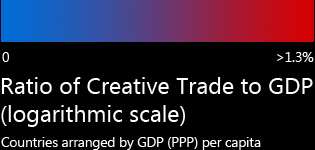
<style>
.page{position:relative;width:315px;height:150px;background:#000000}
.page>*{position:absolute;margin:0}
.t1{font:13.5px "MicrosoftNewTaiLue";color:#ffffff}
.t2{font:23.2px "MicrosoftNewTaiLue";color:#ffffff}
</style>
<div class="page">
<p class="t1" style="left:2px;top:52px;width:312px;height:10px">0                                                                        &gt;1.3%</p>
<p class="t2" style="left:1px;top:77px;width:312px;height:50px">Ratio of Creative Trade to GDP<br>(logarithmic scale)</p>
<p class="t1" style="left:1px;top:137px;width:260px;height:13px">Countries arranged by GDP (PPP) per capita</p>
</div>
